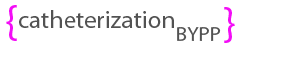
<style>
.page{position:relative;width:300px;height:60px;background:#ffffff}
.page>*{position:absolute;margin:0}
.t1{font:45.8px "MyriadPro-Regular";color:#f30df6}
.t2{font:25px "MyriadPro-Regular";color:#525252}
.t3{font:20.8px "MyriadPro-Regular";color:#525252}
</style>
<div class="page">
<p class="t1" style="left:6px;top:5px;width:11px;height:36px">{</p>
<p class="t2" style="left:19px;top:10px;width:155px;height:18px">catheterization</p>
<p class="t1" style="left:224px;top:7px;width:11px;height:36px">}</p>
<p class="t3" style="left:177px;top:27px;width:44px;height:14px">BYPP</p>
</div>
